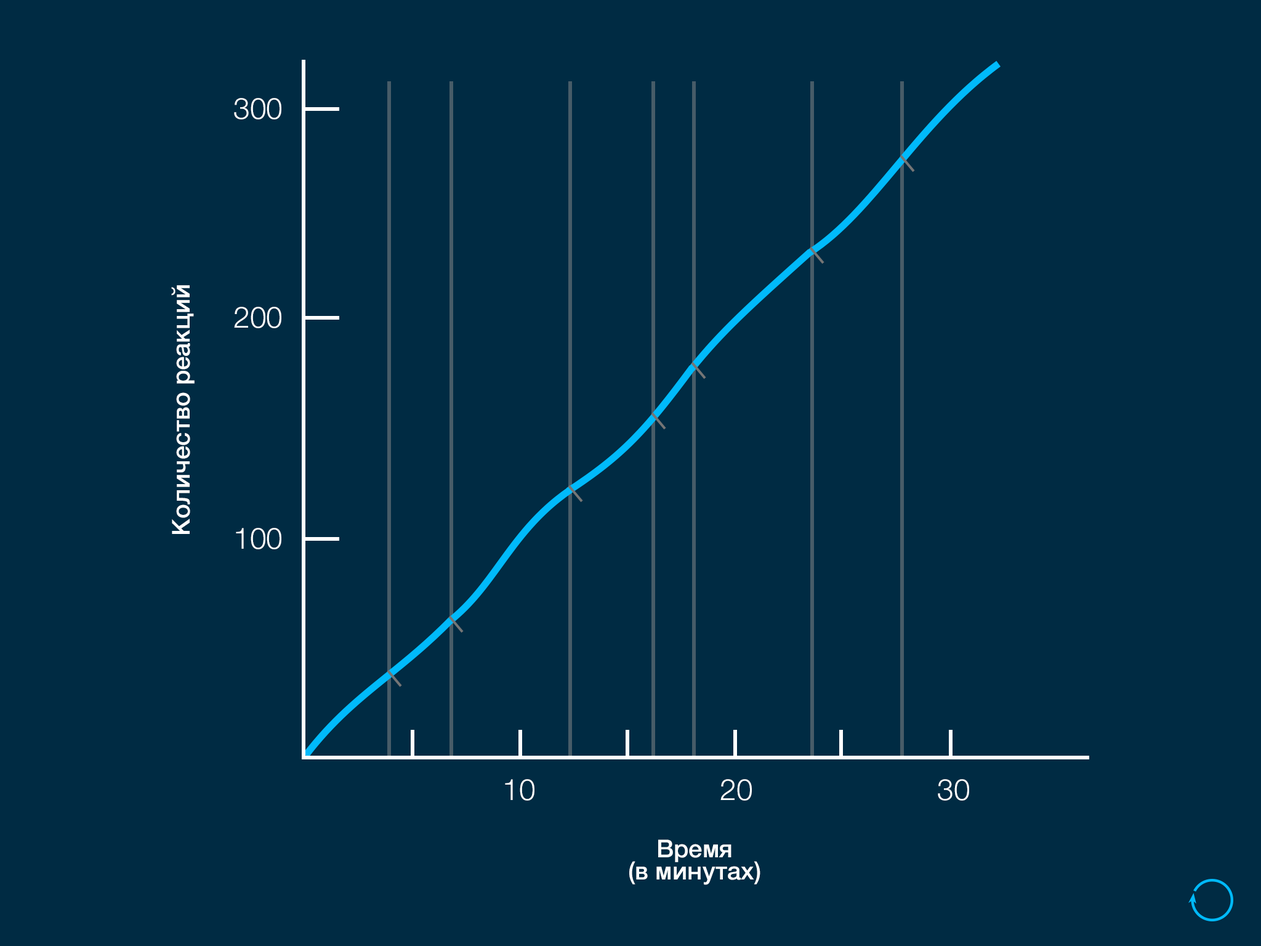
<style>
.page{position:relative;width:1261px;height:946px;background:#002b43}
.page>*{position:absolute;margin:0}
.t1{font:29.6px "HelveticaNeue-Light";color:#ffffff}
.t2{font:24.6px "HelveticaNeue-Medium";color:#ffffff}
.t3{font:24.6px/22.2px "HelveticaNeue-Medium";color:#ffffff}
</style>
<div class="page">
<p class="t1" style="left:234px;top:98px;width:47px;height:21px">300</p>
<p class="t2" style="left:171px;top:285px;width:24px;height:249px;rotate:-90deg">Количество реакций</p>
<p class="t1" style="left:234px;top:307px;width:47px;height:21px">200</p>
<p class="t1" style="left:236px;top:528px;width:45px;height:21px">100</p>
<p class="t1" style="left:505px;top:779px;width:29px;height:21px">10</p>
<p class="t1" style="left:720px;top:779px;width:32px;height:21px">20</p>
<p class="t1" style="left:938px;top:779px;width:31px;height:21px">30</p>
<p class="t3" style="left:629px;top:839px;width:131px;height:46px;text-align:center">Время<br>(в минутах)</p>
</div>
